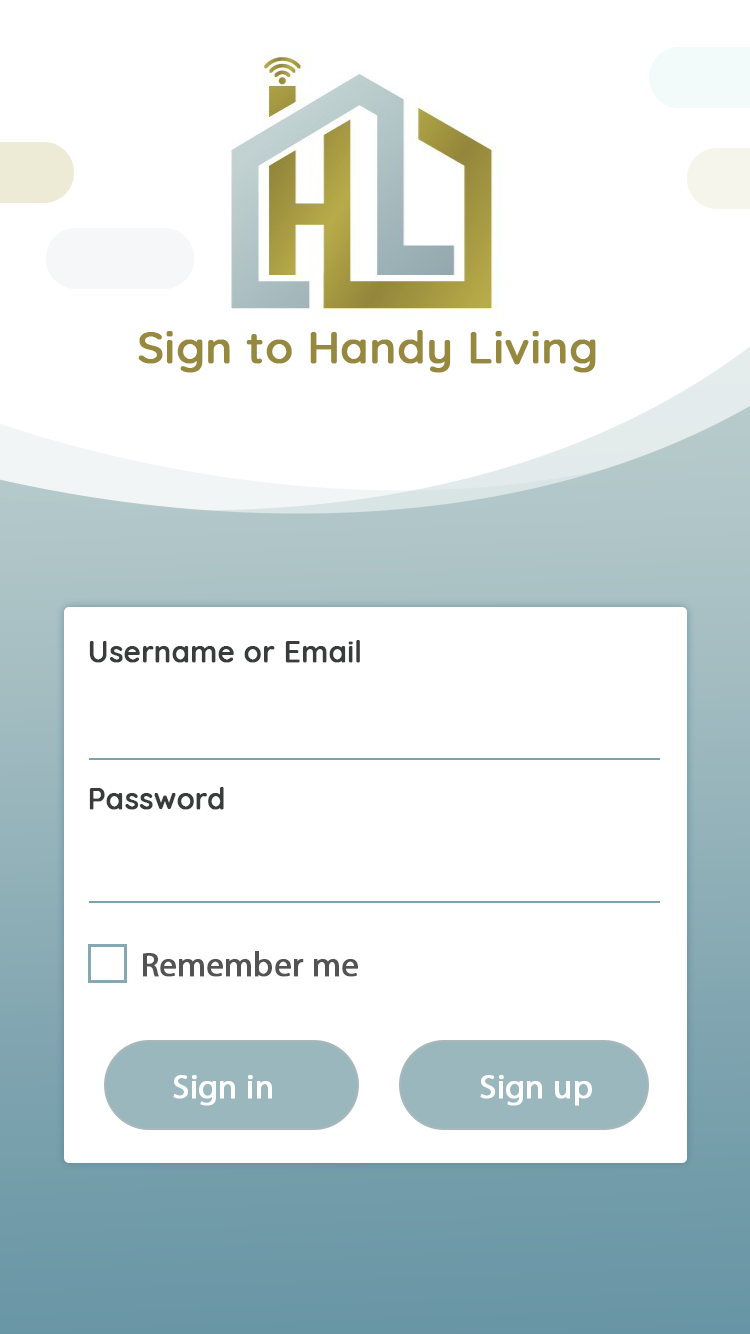
<style>
.page{position:relative;width:750px;height:1334px;background:#ffffff}
.page>*{position:absolute;margin:0}
.t1{font:45px "Quicksand-Medium";color:#96883d;font-weight:bold}
.t2{font:29px "Quicksand-Medium";color:#3a3b3b;font-weight:bold}
.t3{font:34px "MyriadPro-Regular";color:#545353;font-weight:bold}
.t4{font:34px "MyriadPro-Regular";color:#ffffff;font-weight:bold}
</style>
<div class="page">
<p class="t1" style="left:138px;top:330px;width:458px;height:43px">Sign to Handy Living</p>
<p class="t2" style="left:89px;top:640px;width:271px;height:23px">Username or Email</p>
<p class="t2" style="left:89px;top:787px;width:135px;height:23px">Password</p>
<p class="t3" style="left:143px;top:951px;width:215px;height:26px">Remember me</p>
<p class="t4" style="left:173px;top:1075px;width:99px;height:31px">Sign in</p>
<p class="t4" style="left:480px;top:1075px;width:112px;height:31px">Sign up</p>
</div>
